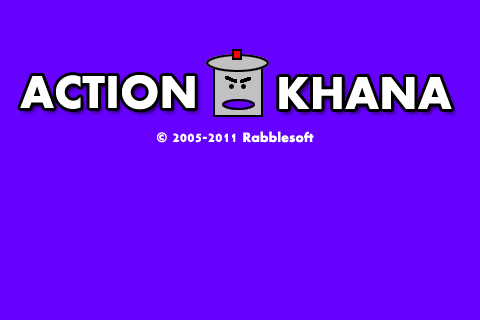
<style>
.page{position:relative;width:480px;height:320px;background:#6600ff}
.page>*{position:absolute;margin:0}
.t1{font:48px "Aharoni-Bold";color:#ffffff}
.t2{font:14px "Aharoni-Bold";color:#ffffff}
.t3{font:18px "Aharoni-Bold";color:#ffffff}
</style>
<div class="page">
<p class="t1" style="left:20px;top:75px;width:175px;height:35px">ACTION</p>
<p class="t1" style="left:279px;top:77px;width:173px;height:32px">KHANA</p>
<p class="t2" style="left:157px;top:131px;width:157px;height:12px">©<span class="t3"> 2005-2011 </span>Rabblesoft</p>
</div>
